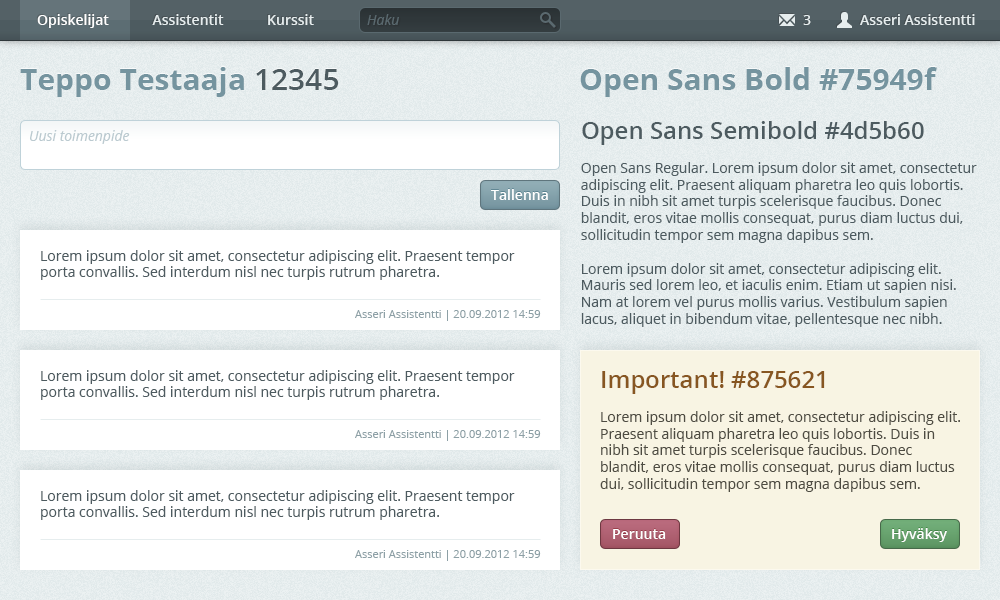
<style>
.page{position:relative;width:1000px;height:600px;background:#ffffff}
.page>*{position:absolute;margin:0}
.t1{font:14px "OpenSans-Semibold";color:#e6edee}
.t2{font:14px "OpenSans-Semibold";color:#ffffff}
.t3{font:14px "OpenSans-Italic";color:#5a696f}
.t4{font:30px "OpenSans-Bold";color:#75949f}
.t5{font:30px "OpenSans-Semibold";color:#4d5b60}
.t6{font:14px "OpenSans";color:#4d5b60}
.t7{font:24px "OpenSans-Semibold";color:#4d5b60}
.t8{font:14px "OpenSans-Italic";color:#bbcad0}
.t9{font:11px "OpenSans";color:#8da0a6}
.t10{font:14px "OpenSans";color:#4e4c42}
.t11{font:24px "OpenSans-Semibold";color:#875621}
</style>
<div class="page">
<p class="t1" style="left:37px;top:14px;width:277px;height:14px"><span class="t2">Opiskelijat           </span> Assistentit            Kurssit</p>
<p class="t3" style="left:367px;top:14px;width:32px;height:11px">Haku</p>
<p class="t1" style="left:803px;top:15px;width:8px;height:10px">3</p>
<p class="t1" style="left:860px;top:14px;width:115px;height:11px">Asseri Assistentti</p>
<p class="t4" style="left:20px;top:67px;width:319px;height:30px">Teppo Testaaja <span class="t5">12345</span></p>
<p class="t4" style="left:580px;top:67px;width:357px;height:30px">Open Sans Bold #75949f</p>
<p class="t6" style="left:581px;top:121px;width:396px;height:206px"><span class="t7">Open Sans Semibold #4d5b60<br></span><br>Open Sans Regular. Lorem ipsum dolor sit amet, consectetur adipiscing elit. Praesent aliquam pharetra leo quis lobortis. Duis in nibh sit amet turpis scelerisque faucibus. Donec blandit, eros vitae mollis consequat, purus diam luctus dui, sollicitudin tempor sem magna dapibus sem.<br><br>Lorem ipsum dolor sit amet, consectetur adipiscing elit. Mauris sed lorem leo, et iaculis enim. Etiam ut sapien nisi. Nam at lorem vel purus mollis varius. Vestibulum sapien lacus, aliquet in bibendum vitae, pellentesque nec nibh.</p>
<p class="t8" style="left:30px;top:130px;width:100px;height:14px">Uusi toimenpide</p>
<p class="t2" style="left:491px;top:189px;width:57px;height:11px">Tallenna</p>
<p class="t6" style="left:41px;top:250px;width:474px;height:30px">Lorem ipsum dolor sit amet, consectetur adipiscing elit. Praesent tempor porta convallis. Sed interdum nisl nec turpis rutrum pharetra.</p>
<p class="t9" style="left:355px;top:310px;width:186px;height:11px">Asseri Assistentti | 20.09.2012 14:59</p>
<p class="t6" style="left:41px;top:370px;width:474px;height:30px">Lorem ipsum dolor sit amet, consectetur adipiscing elit. Praesent tempor porta convallis. Sed interdum nisl nec turpis rutrum pharetra.</p>
<p class="t10" style="left:600px;top:371px;width:360px;height:121px"><span class="t11">Important! #875621<br><br></span>Lorem ipsum dolor sit amet, consectetur adipiscing elit. Praesent aliquam pharetra leo quis lobortis. Duis in nibh sit amet turpis scelerisque faucibus. Donec blandit, eros vitae mollis consequat, purus diam luctus dui, sollicitudin tempor sem magna dapibus sem.</p>
<p class="t9" style="left:355px;top:430px;width:186px;height:11px">Asseri Assistentti | 20.09.2012 14:59</p>
<p class="t6" style="left:41px;top:490px;width:474px;height:30px">Lorem ipsum dolor sit amet, consectetur adipiscing elit. Praesent tempor porta convallis. Sed interdum nisl nec turpis rutrum pharetra.</p>
<p class="t2" style="left:613px;top:529px;width:53px;height:10px">Peruuta</p>
<p class="t2" style="left:892px;top:528px;width:55px;height:14px">Hyväksy</p>
<p class="t9" style="left:355px;top:550px;width:186px;height:11px">Asseri Assistentti | 20.09.2012 14:59</p>
</div>
